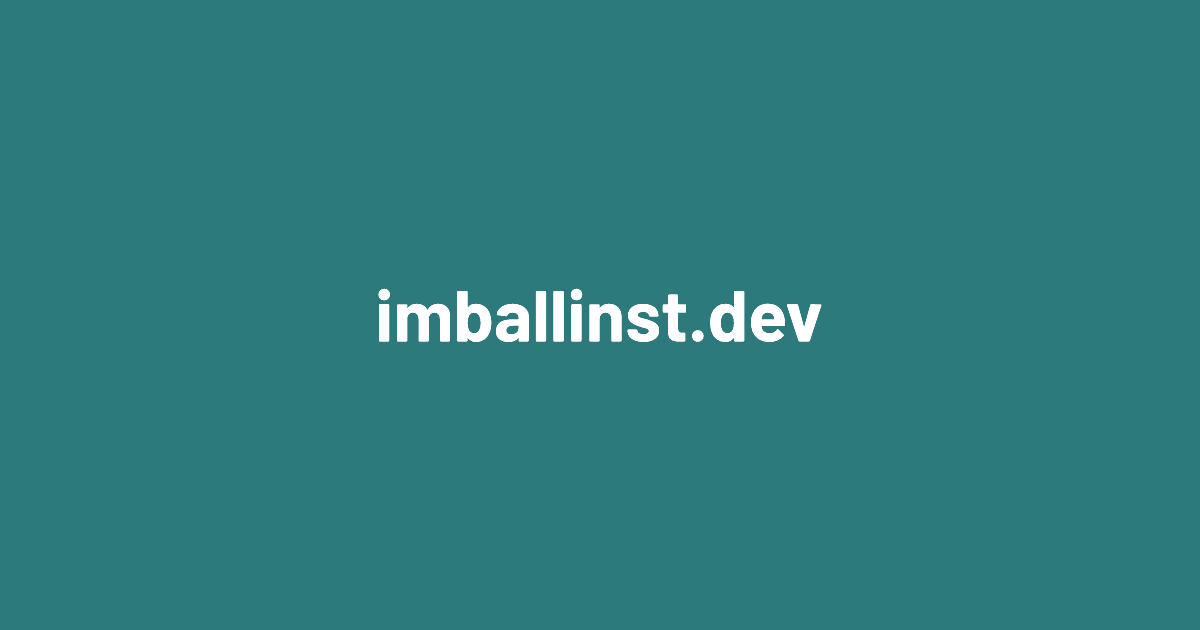
<style>
.page{position:relative;width:1200px;height:630px;background:#2c7a7b}
.page>*{position:absolute;margin:0}
.t1{font:72px "Barlow-Bold";color:#ffffff}
</style>
<div class="page">
<p class="t1" style="left:378px;top:288px;width:444px;height:54px">imballinst.dev</p>
</div>
